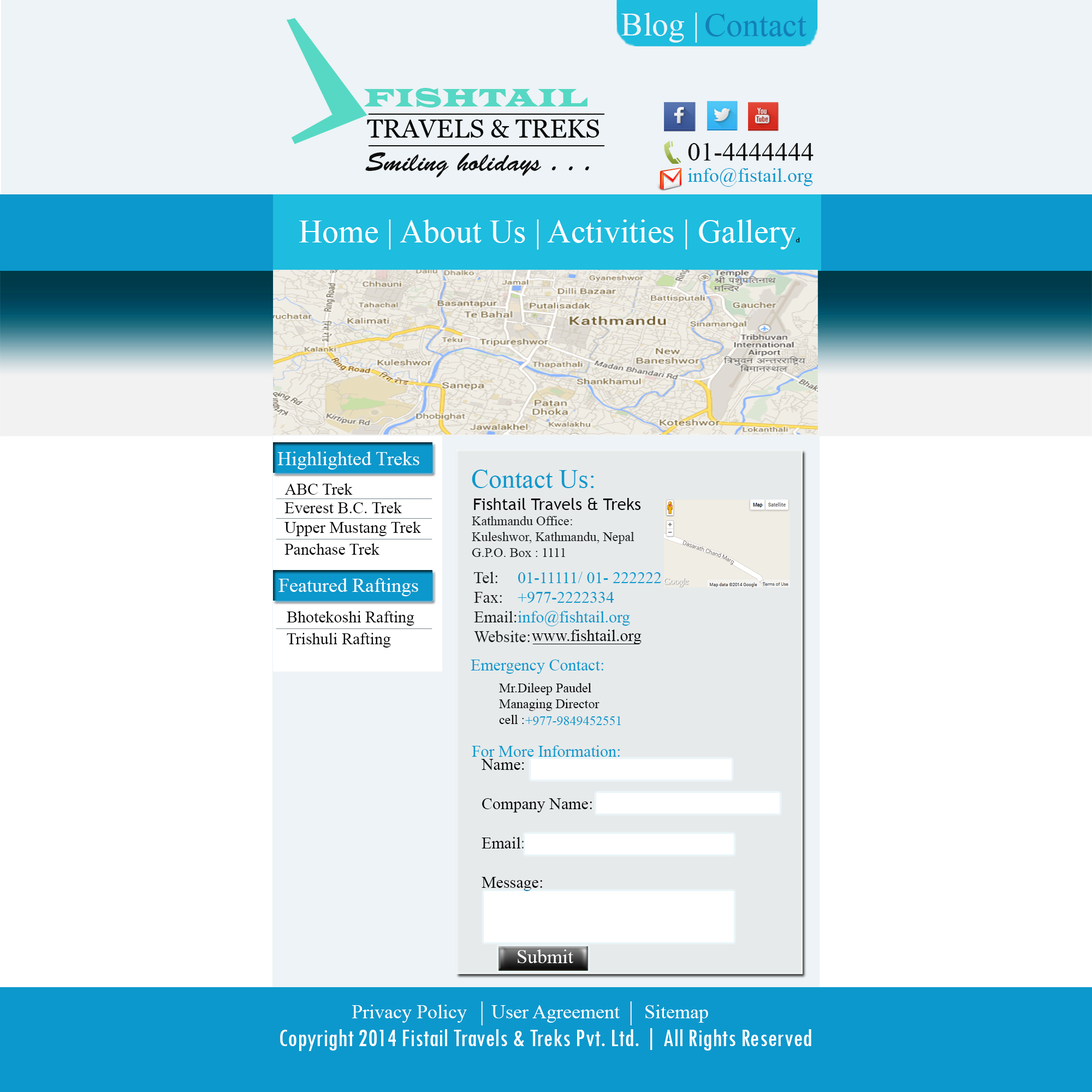
<style>
.page{position:relative;width:1092px;height:1092px;background:#ffffff}
.page>*{position:absolute;margin:0}
.t1{font:32.8px "TimesNewRomanPSMT";color:#edf3f6}
.t2{font:32.8px "TimesNewRomanPSMT";color:#1380b8}
.t3{font:26.3px "LatinWide";color:#56d8c4;scale:0.88 1}
.t4{font:26.2px "Vani";color:#070a0a}
.t5{font:26.2px "TimesNewRomanPSMT";color:#0f0e0e}
.t6{font:26.2px "BrushScriptStd";color:#0f0e0e}
.t7{font:19.7px "TimesNewRomanPSMT";color:#0c98cc}
.t8{font:32.8px "TimesNewRomanPSMT";color:#ffffff}
.t9{font:6.6px "MyriadPro-Regular";color:#000000}
.t10{font:19.7px "TimesNewRomanPSMT";color:#ffffff}
.t11{font:26.2px "TimesNewRomanPSMT";color:#0c98cc}
.t12{font:16.4px "TimesNewRomanPSMT";color:#080808}
.t13{font:16.4px "TrebuchetMS";color:#080808}
.t14{font:16.4px "TimesNewRomanPSMT";color:#73848b}
.t15{font:13.1px "TimesNewRomanPSMT";color:#191b1c}
.t16{font:16.4px "TimesNewRomanPSMT";color:#191b1c}
.t17{font:16.4px "TimesNewRomanPSMT";color:#0c98cc}
.t18{font:13.1px "TimesNewRomanPSMT";color:#050505}
.t19{font:13.1px "TimesNewRomanPSMT";color:#0c98cc}
.t20{font:16.4px "TimesNewRomanPSMT";color:#050505}
.t21{font:26.2px "TwCenMT-Condensed";color:#ffffff}
</style>
<div class="page">
<p class="t1" style="left:621px;top:13px;width:76px;height:30px">Blog |</p>
<p class="t2" style="left:705px;top:14px;width:101px;height:23px">Contact</p>
<p class="t3" style="left:364px;top:88px;width:223px;height:20px">FISHTAIL</p>
<p class="t4" style="left:368px;top:114px;width:236px;height:32px">______________<br>______________</p>
<p class="t4" style="left:367px;top:120px;width:232px;height:18px">TRAVELS &amp; TREKS</p>
<p class="t5" style="left:688px;top:143px;width:126px;height:18px">01-4444444</p>
<p class="t6" style="left:365px;top:152px;width:224px;height:25px">Smiling holidays . . .</p>
<p class="t7" style="left:688px;top:168px;width:125px;height:19px">info@fistail.org</p>
<p class="t8" style="left:299px;top:219px;width:500px;height:31px">Home | About Us | Activities | Gallery<span class="t9">d</span></p>
<p class="t10" style="left:277px;top:452px;width:142px;height:18px">Highlighted Treks</p>
<p class="t11" style="left:472px;top:470px;width:122px;height:18px">Contact Us:</p>
<p class="t12" style="left:284px;top:483px;width:69px;height:12px">ABC Trek</p>
<p class="t13" style="left:474px;top:498px;width:167px;height:12px">Fishtail Travels &amp; Treks</p>
<p class="t14" style="left:276px;top:498px;width:156px;height:1px">___________________</p>
<p class="t12" style="left:284px;top:502px;width:118px;height:11px">Everest B.C. Trek</p>
<p class="t14" style="left:276px;top:518px;width:156px;height:1px">___________________</p>
<p class="t12" style="left:284px;top:521px;width:137px;height:15px">Upper Mustang Trek</p>
<p class="t15" style="left:472px;top:516px;width:162px;height:41px">Kathmandu Office:<br>Kuleshwor, Kathmandu, Nepal<br>G.P.O. Box : 1111</p>
<p class="t14" style="left:276px;top:539px;width:156px;height:0px">___________________</p>
<p class="t12" style="left:284px;top:543px;width:95px;height:12px">Panchase Trek</p>
<p class="t10" style="left:278px;top:578px;width:140px;height:18px">Featured Raftings</p>
<p class="t16" style="left:474px;top:572px;width:56px;height:70px">Tel: <br>Fax:<br>Email:<br>Website:</p>
<p class="t17" style="left:518px;top:572px;width:143px;height:54px">01-11111/ 01- 222222<br>+977-2222334<br>info@fishtail.org</p>
<p class="t12" style="left:287px;top:611px;width:127px;height:15px">Bhotekoshi Rafting</p>
<p class="t14" style="left:276px;top:628px;width:156px;height:1px">___________________</p>
<p class="t12" style="left:532px;top:630px;width:110px;height:14px">www.fishtail.org</p>
<p class="t12" style="left:287px;top:633px;width:104px;height:15px">Trishuli Rafting</p>
<p class="t12" style="left:532px;top:644px;width:108px;height:0px">_____________</p>
<p class="t17" style="left:471px;top:660px;width:132px;height:14px">Emergency Contact:</p>
<p class="t18" style="left:499px;top:683px;width:101px;height:41px">Mr.Dileep Paudel<br>Managing Director<br>cell :</p>
<p class="t19" style="left:525px;top:716px;width:96px;height:9px">+977-9849452551</p>
<p class="t17" style="left:472px;top:745px;width:148px;height:12px">For More Information:</p>
<p class="t20" style="left:481px;top:759px;width:111px;height:132px">Name:<br><br>Company Name:<br><br>Email:<br><br>Message:</p>
<p class="t10" style="left:518px;top:949px;width:55px;height:14px">Submit</p>
<p class="t10" style="left:352px;top:1005px;width:356px;height:18px">Privacy Policy     User Agreement     Sitemap</p>
<p class="t21" style="left:280px;top:1028px;width:531px;height:23px">Copyright 2014 Fistail Travels &amp; Treks Pvt. Ltd. | All Rights Reserved</p>
</div>
